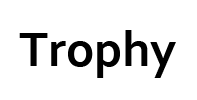
<style>
.page{position:relative;width:197px;height:100px;background:#ffffff}
.page>*{position:absolute;margin:0}
.t1{font:50.8px "Corbel-Bold";color:#000000}
</style>
<div class="page">
<p class="t1" style="left:19px;top:30px;width:157px;height:48px">Trophy</p>
</div>
